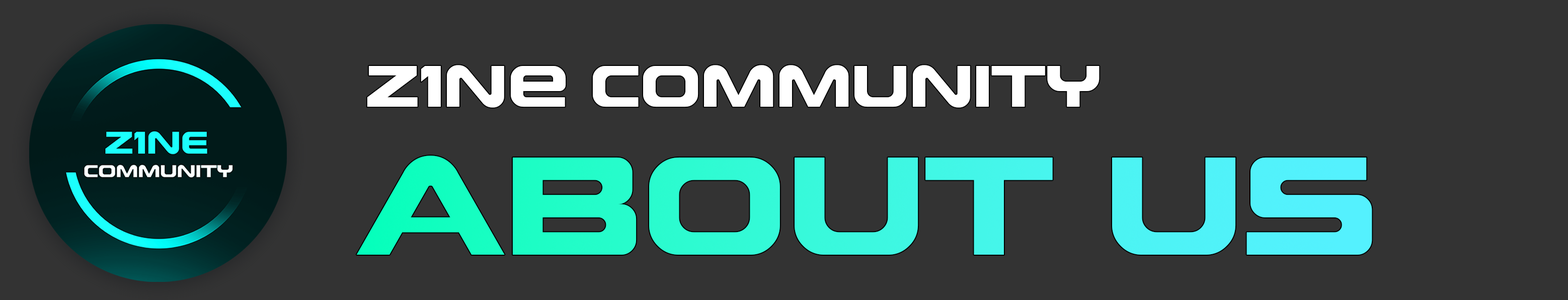
<style>
.page{position:relative;width:1568px;height:300px;background:#333333}
.page>*{position:absolute;margin:0}
.t1{font:75.3px "Future-Earth";color:#ffffff}
.t2{font:179.4px "Future-Earth"}
</style>
<div class="page">
<p class="t1" style="left:367px;top:65px;width:733px;height:43px">z1Ne Community</p>
<p class="t2" style="left:356px;top:155px;width:1016px;height:100px">ABOUT US</p>
</div>
